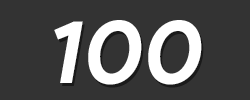
<style>
.page{position:relative;width:250px;height:100px;background:#333333}
.page>*{position:absolute;margin:0}
.t1{font:90px "ProductSans-BoldItalic";color:#ffffff}
</style>
<div class="page">
<p class="t1" style="left:54px;top:20px;width:148px;height:65px">100</p>
</div>
